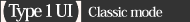
<style>
.page{position:relative;width:190px;height:22px;background:#333333}
.page>*{position:absolute;margin:0}
.t1{font:14px "HeiseiMinStd-W7";letter-spacing:-0.04em;color:#ffffff}
.t2{font:18px "HeiseiMinStd-W7";letter-spacing:-0.08em;color:#ffffff}
</style>
<div class="page">
<p class="t1" style="left:8px;top:4px;width:155px;height:18px"><span class="t2">Type 1 UI     </span>Classic mode</p>
</div>
